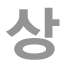
<style>
.page{position:relative;width:63px;height:67px;background:#ffffff}
.page>*{position:absolute;margin:0}
.t1{font:58.3px "YDIYGO350";color:#949494}
</style>
<div class="page">
<p class="t1" style="left:6px;top:7px;width:54px;height:53px">상</p>
</div>
